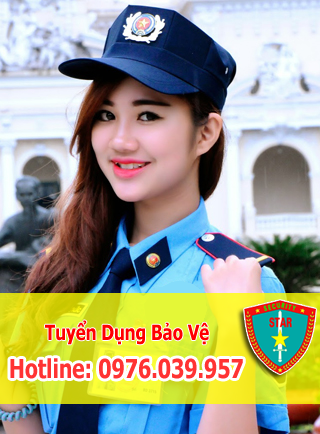
<style>
.page{position:relative;width:320px;height:434px}
.page>*{position:absolute;margin:0}
.t1{font:21px "Tahoma-Bold";color:#ff0000;scale:0.8 1}
.t2{font:26px "Tahoma-Bold";color:#ff3333;scale:0.8 1}
</style>
<div class="page">
<p class="t1" style="left:45px;top:320px;width:164px;height:25px">Tuyển Dụng Bảo Vệ</p>
<p class="t2" style="left:10px;top:358px;width:233px;height:21px">Hotline: 0976.039.957</p>
</div>
